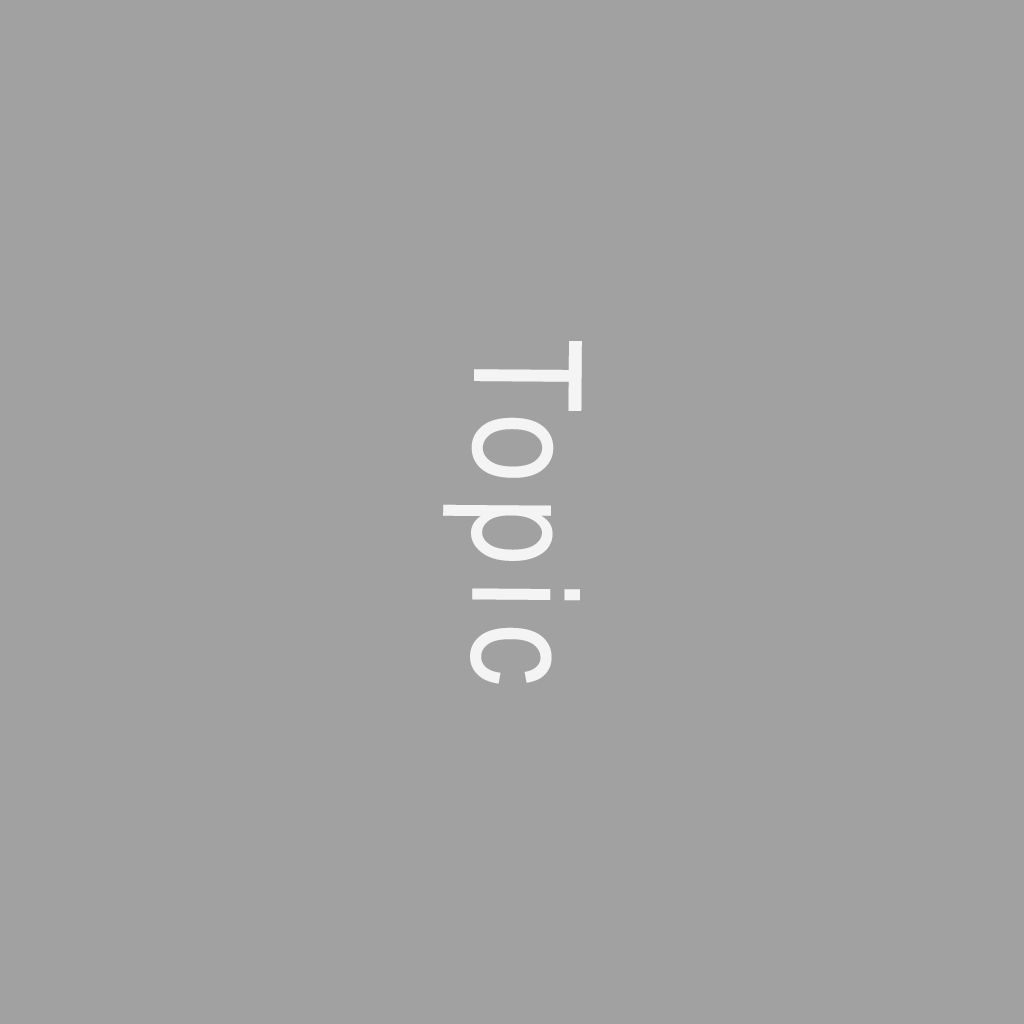
<style>
.page{position:relative;width:1024px;height:1024px;background:#a1a1a1}
.page>*{position:absolute;margin:0}
.t1{font:150px "ArialNarrow";letter-spacing:0.1em;color:#f4f4f4}
</style>
<div class="page">
<p class="t1" style="left:443px;top:341px;width:139px;height:343px;rotate:90deg">Topic</p>
</div>
